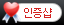
<style>
.page{position:relative;width:64px;height:25px;background:#ffffff}
.page>*{position:absolute;margin:0}
.t1{font:12px "morris9";letter-spacing:-0.075em;color:#d32221}
</style>
<div class="page">
<p class="t1" style="left:24px;top:8px;width:28px;height:10px">인증샵</p>
</div>
